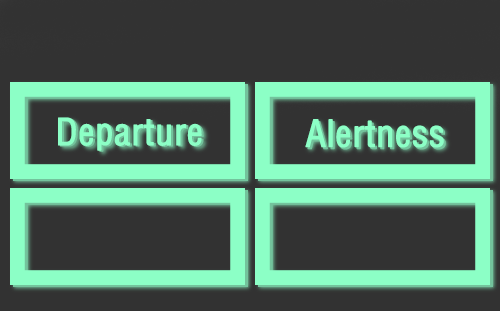
<style>
.page{position:relative;width:500px;height:311px;background:#323232}
.page>*{position:absolute;margin:0}
.t1{font:36px "FZYTK--GBK1-0";color:#8cffc6;font-weight:bold}
.t2{font:36px "FZYTK--GBK1-0";font-weight:bold}
</style>
<div class="page">
<p class="t1" style="left:58px;top:117px;width:144px;height:34px">Departure</p>
<p class="t2" style="left:60px;top:118px;width:144px;height:34px">Departure</p>
<p class="t1" style="left:305px;top:119px;width:139px;height:29px">Alertness</p>
<p class="t2" style="left:307px;top:121px;width:139px;height:29px">Alertness</p>
</div>
